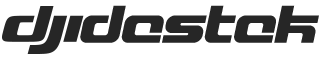
<style>
.page{position:relative;width:320px;height:60px;background:#ffffff}
.page>*{position:absolute;margin:0}
.t1{font:64px "Blaster-Italic";letter-spacing:-0.04em;color:#262626}
</style>
<div class="page">
<p class="t1" style="left:80px;top:5px;width:239px;height:38px">destek</p>
</div>
